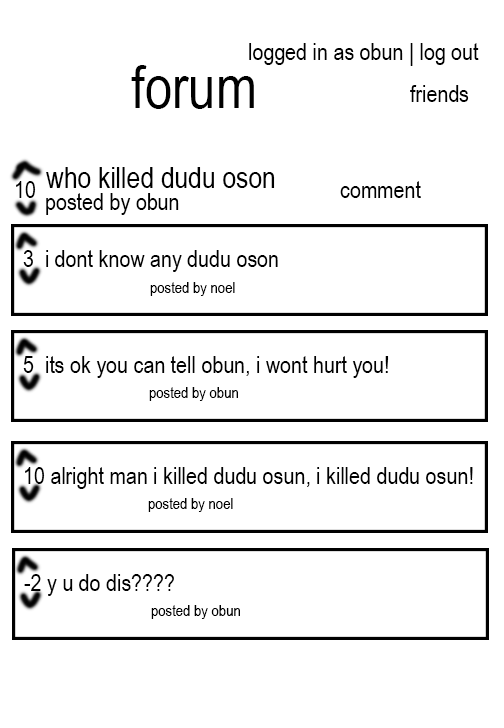
<style>
.page{position:relative;width:504px;height:728px;background:#ffffff}
.page>*{position:absolute;margin:0}
.t1{font:24px "ArialNarrow";color:#000000}
.t2{font:60px "ArialNarrow";color:#000000}
.t3{font:30px "ArialNarrow";color:#000000}
.t4{font:16px "ArialNarrow";color:#000000}
</style>
<div class="page">
<p class="t1" style="left:249px;top:43px;width:230px;height:23px">logged in as obun | log out</p>
<p class="t2" style="left:131px;top:65px;width:123px;height:44px">forum</p>
<p class="t1" style="left:410px;top:85px;width:59px;height:17px">friends</p>
<p class="t3" style="left:46px;top:167px;width:229px;height:21px">who killed dudu oson</p>
<p class="t1" style="left:16px;top:181px;width:20px;height:17px">10</p>
<p class="t1" style="left:340px;top:181px;width:81px;height:17px">comment</p>
<p class="t1" style="left:46px;top:193px;width:133px;height:22px">posted by obun</p>
<p class="t1" style="left:23px;top:250px;width:255px;height:22px">3  i dont know any dudu oson</p>
<p class="t4" style="left:150px;top:282px;width:85px;height:14px">posted by noel</p>
<p class="t1" style="left:23px;top:356px;width:366px;height:22px">5  its ok you can tell obun, i wont hurt you!</p>
<p class="t4" style="left:149px;top:387px;width:89px;height:14px">posted by obun</p>
<p class="t1" style="left:25px;top:467px;width:448px;height:22px">10 alright man i killed dudu osun, i killed dudu osun!</p>
<p class="t4" style="left:148px;top:498px;width:85px;height:14px">posted by noel</p>
<p class="t1" style="left:24px;top:574px;width:150px;height:22px">-2 y u do dis????</p>
<p class="t4" style="left:151px;top:605px;width:89px;height:14px">posted by obun</p>
</div>
